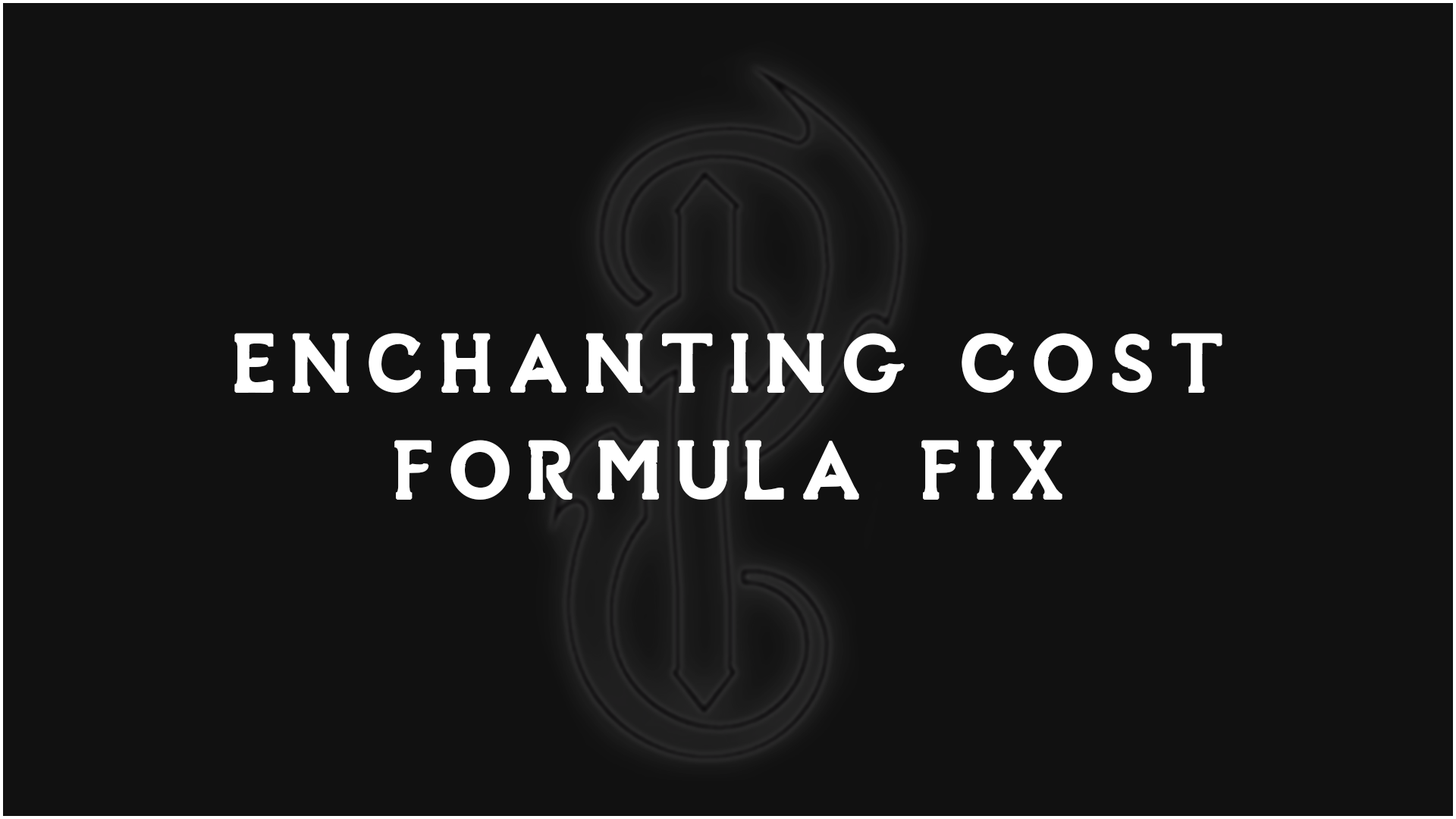
<style>
.page{position:relative;width:1456px;height:819px;background:#111111}
.page>*{position:absolute;margin:0}
.t1{font:102.4px "SovngardeLight";letter-spacing:0.14em;color:#ffffff;text-transform:uppercase;font-weight:bold}
</style>
<div class="page">
<p class="t1" style="left:234px;top:333px;width:988px;height:60px">Enchanting Cost</p>
<p class="t1" style="left:394px;top:440px;width:668px;height:60px">Formula Fix</p>
</div>
